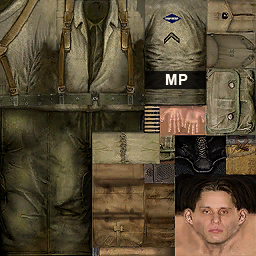
<style>
.page{position:relative;width:256px;height:256px}
.page>*{position:absolute;margin:0}
.t1{font:15px "Arial-BoldMT";letter-spacing:0.04em;color:#fffaed}
</style>
<div class="page">
<p class="t1" style="left:165px;top:74px;width:23px;height:11px">MP</p>
</div>
